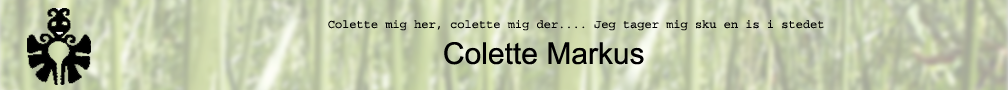
<style>
.page{position:relative;width:1008px;height:90px}
.page>*{position:absolute;margin:0}
.t1{font:12px "Courier";color:#000000}
.t2{font:30px "ArialMT";color:#000000}
</style>
<div class="page">
<p class="t1" style="left:328px;top:20px;width:496px;height:45px">Colette mig her, colette mig der.... Jeg tager mig sku en is i stedet<br>                <span class="t2">Colette Markus</span></p>
</div>
